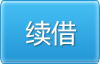
<style>
.page{position:relative;width:100px;height:64px}
.page>*{position:absolute;margin:0}
.t1{font:25.6px "MicrosoftYaHei";color:#ffffff;text-transform:uppercase}
</style>
<div class="page">
<p class="t1" style="left:25px;top:20px;width:51px;height:26px">续借</p>
</div>
